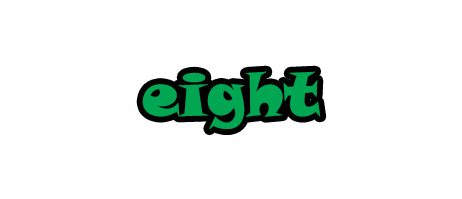
<style>
.page{position:relative;width:462px;height:199px;background:#ffffff}
.page>*{position:absolute;margin:0}
.t1{font:60px "SnapITC-Regular";color:#00a651}
</style>
<div class="page">
<p class="t1" style="left:142px;top:71px;width:179px;height:59px">eight</p>
</div>
